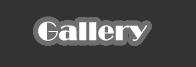
<style>
.page{position:relative;width:196px;height:67px;background:#333333}
.page>*{position:absolute;margin:0}
.t1{font:26.7px "Broadway";color:#ffffff;scale:1.03 1}
</style>
<div class="page">
<p class="t1" style="left:38px;top:21px;width:109px;height:20px">Gallery</p>
</div>
